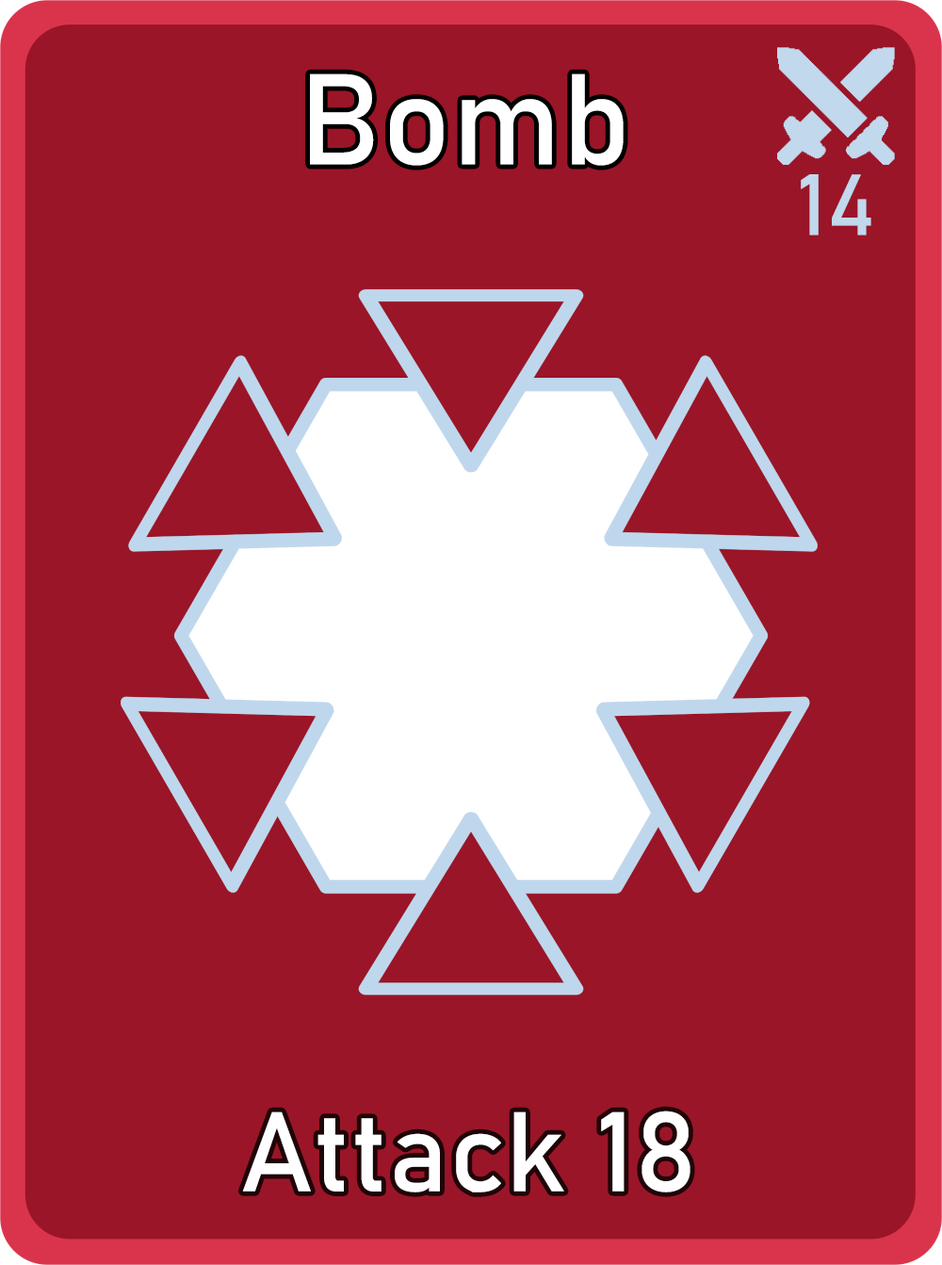
<style>
.page{position:relative;width:942px;height:1265px;background:#9a1527}
.page>*{position:absolute;margin:0}
.t1{font:126.7px "Bahnschrift";letter-spacing:0.01em;color:#ffffff}
.t2{font:85px "Bahnschrift";letter-spacing:0.01em;color:#c1d8ed}
.t3{font:111.3px "Bahnschrift";letter-spacing:0.01em;color:#ffffff}
</style>
<div class="page">
<p class="t1" style="left:310px;top:73px;width:314px;height:93px">Bomb</p>
<p class="t2" style="left:801px;top:174px;width:71px;height:62px">14</p>
<p class="t3" style="left:242px;top:1111px;width:449px;height:82px">Attack 18</p>
</div>
